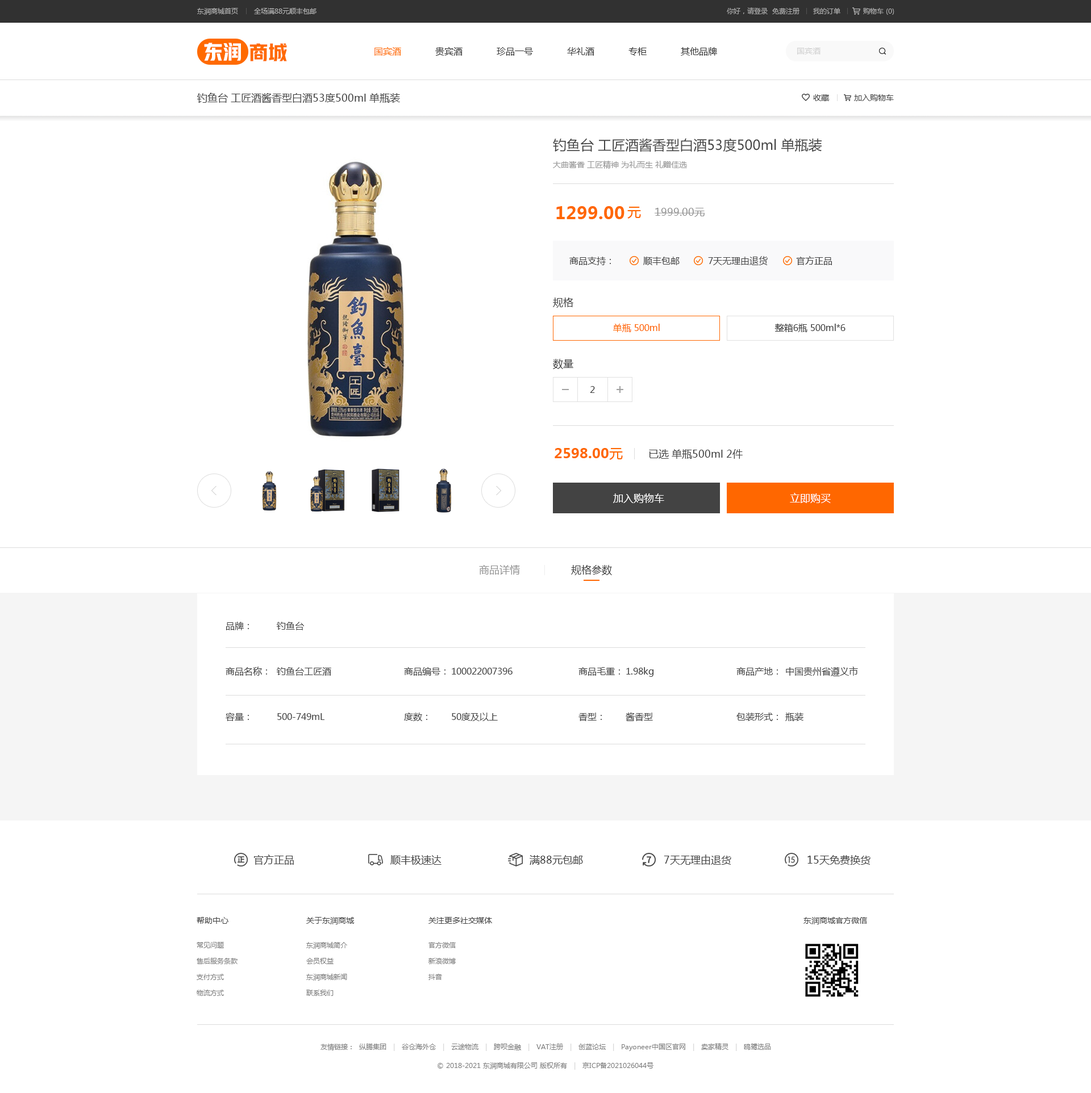
<style>
.page{position:relative;width:1091px;height:1093px;background:#ffffff}
.page>*{position:absolute;margin:0}
.t1{font:6.8px "MicrosoftYaHei";color:#b0b0b0}
.t2{font:6.8px "MicrosoftYaHei";color:#acacac}
.t3{font:19.3px "HYYakuHei-HEW";color:#ffffff}
.t4{font:19.3px "HYYakuHei-HEW";color:#ff6a00}
.t5{font:9.1px "MicrosoftYaHei";color:#333333}
.t6{font:9.1px "MicrosoftYaHei";color:#ff6a00}
.t7{font:8px "MicrosoftYaHei";color:#d2d2d2}
.t8{font:10.2px "MicrosoftYaHei";color:#434343}
.t9{font:8px "MicrosoftYaHei";color:#434343}
.t10{font:13.6px "MicrosoftYaHei";color:#434343}
.t11{font:8px "MicrosoftYaHei";color:#959595}
.t12{font:17px "MicrosoftYaHei-Bold";color:#ff6700}
.t13{font:13.6px "MicrosoftYaHei";color:#ff6700}
.t14{font:10.2px "MicrosoftYaHei";color:#959595}
.t15{font:9.1px "MicrosoftYaHei";color:#434343}
.t16{font:9.1px "MicrosoftYaHei";color:#ff6700}
.t17{font:13.6px "MicrosoftYaHei-Bold";color:#ff6700}
.t18{font:10.2px "MicrosoftYaHei";color:#ffffff}
.t19{font:9.1px/45.4px "MicrosoftYaHei";color:#434343}
.t20{font:6.8px/15.9px "MicrosoftYaHei";color:#7d7d7d}
.t21{font:6.8px "MicrosoftYaHei";color:#7d7d7d}
.t22{font:6.8px "MicrosoftYaHei";color:#d2d2d2}
</style>
<div class="page">
<p class="t1" style="left:197px;top:8px;width:119px;height:7px">东润商城首页       全场满88元顺丰包邮</p>
<p class="t2" style="left:726px;top:7px;width:168px;height:8px">你好，请登录  免费注册      我的订单          购物车 (0)</p>
<p class="t3" style="left:204px;top:43px;width:37px;height:18px">东润</p>
<p class="t4" style="left:249px;top:43px;width:38px;height:18px">商城</p>
<p class="t5" style="left:374px;top:47px;width:343px;height:9px"><span class="t6">国宾酒</span>            贵宾酒            珍品一号            华礼酒            专柜            其他品牌</p>
<p class="t7" style="left:797px;top:48px;width:23px;height:7px">国宾酒</p>
<p class="t8" style="left:197px;top:93px;width:203px;height:10px">钓鱼台 工匠酒酱香型白酒53度500ml 单瓶装</p>
<p class="t9" style="left:813px;top:94px;width:80px;height:7px">收藏           加入购物车</p>
<p class="t10" style="left:553px;top:138px;width:268px;height:14px">钓鱼台 工匠酒酱香型白酒53度500ml 单瓶装</p>
<p class="t11" style="left:553px;top:161px;width:134px;height:8px">大曲酱香 工匠精神 为礼而生 礼赠佳选</p>
<p class="t12" style="left:556px;top:206px;width:68px;height:13px">1299.00</p>
<p class="t13" style="left:627px;top:207px;width:14px;height:12px">元</p>
<p class="t14" style="left:654px;top:208px;width:51px;height:9px">1999.00元</p>
<p class="t15" style="left:569px;top:256px;width:263px;height:9px">商品支持：          顺丰包邮          7天无理由退货          官方正品</p>
<p class="t8" style="left:553px;top:298px;width:20px;height:10px">规格</p>
<p class="t16" style="left:613px;top:324px;width:46px;height:8px">单瓶 500ml</p>
<p class="t15" style="left:774px;top:324px;width:71px;height:8px">整箱6瓶 500ml*6</p>
<p class="t8" style="left:553px;top:359px;width:20px;height:10px">数量</p>
<p class="t15" style="left:590px;top:386px;width:5px;height:7px">2</p>
<p class="t17" style="left:554px;top:448px;width:69px;height:12px">2598.00<span class="t13">元</span></p>
<p class="t8" style="left:649px;top:449px;width:93px;height:10px">已选 单瓶500ml 2件</p>
<p class="t18" style="left:613px;top:494px;width:51px;height:9px">加入购物车</p>
<p class="t18" style="left:790px;top:493px;width:40px;height:10px">立即购买</p>
<p class="t14" style="left:479px;top:565px;width:133px;height:10px">商品详情                  <span class="t8">规格参数</span></p>
<p class="t19" style="left:225px;top:622px;width:42px;height:99px">品牌：<br>商品名称：<br>容量：</p>
<p class="t19" style="left:277px;top:622px;width:54px;height:98px">钓鱼台<br>钓鱼台工匠酒<br>500-749mL</p>
<p class="t19" style="left:404px;top:667px;width:41px;height:54px">商品编号：<br>度数：</p>
<p class="t19" style="left:452px;top:668px;width:60px;height:53px">100022007396<br>50度及以上</p>
<p class="t19" style="left:578px;top:667px;width:42px;height:54px">商品毛重：<br>香型：</p>
<p class="t19" style="left:625px;top:667px;width:28px;height:54px">1.98kg<br>酱香型</p>
<p class="t19" style="left:736px;top:667px;width:42px;height:54px">商品产地：<br>包装形式：</p>
<p class="t19" style="left:785px;top:667px;width:73px;height:54px">中国贵州省遵义市<br>瓶装</p>
<p class="t8" style="left:254px;top:855px;width:40px;height:10px">官方正品</p>
<p class="t8" style="left:390px;top:855px;width:51px;height:10px">顺丰极速达</p>
<p class="t8" style="left:529px;top:855px;width:54px;height:10px">满88元包邮</p>
<p class="t8" style="left:663px;top:855px;width:68px;height:10px">7天无理由退货</p>
<p class="t8" style="left:807px;top:855px;width:63px;height:10px">15天免费换货</p>
<p class="t9" style="left:197px;top:917px;width:31px;height:7px">帮助中心</p>
<p class="t9" style="left:306px;top:917px;width:48px;height:8px">关于东润商城</p>
<p class="t9" style="left:428px;top:917px;width:64px;height:7px">关注更多社交媒体</p>
<p class="t9" style="left:803px;top:917px;width:64px;height:8px">东润商城官方微信</p>
<p class="t20" style="left:197px;top:942px;width:40px;height:54px">常见问题<br>售后服务条款<br>支付方式<br>物流方式</p>
<p class="t20" style="left:306px;top:942px;width:41px;height:54px">东润商城简介<br>会员权益<br>东润商城新闻<br>联系我们</p>
<p class="t20" style="left:428px;top:942px;width:28px;height:38px">官方微信<br>新浪微博<br>抖音</p>
<p class="t21" style="left:320px;top:1043px;width:451px;height:8px">友情链接：  纵腾集团   <span class="t22">|   </span>谷仓海外仓   <span class="t22">|   </span>云途物流   <span class="t22">|   </span>跨呗金融   <span class="t22">|   </span>VAT注册   <span class="t22">|   </span>创蓝论坛   <span class="t22">|   </span>Payoneer中国区官网   <span class="t22">|   </span>卖家精灵   <span class="t22">|   </span>鸥鹭选品</p>
<p class="t21" style="left:437px;top:1063px;width:216px;height:7px">© 2018-2021 东润商城有限公司 版权所有   <span class="t22">|   </span>京ICP备2021026044号</p>
</div>
